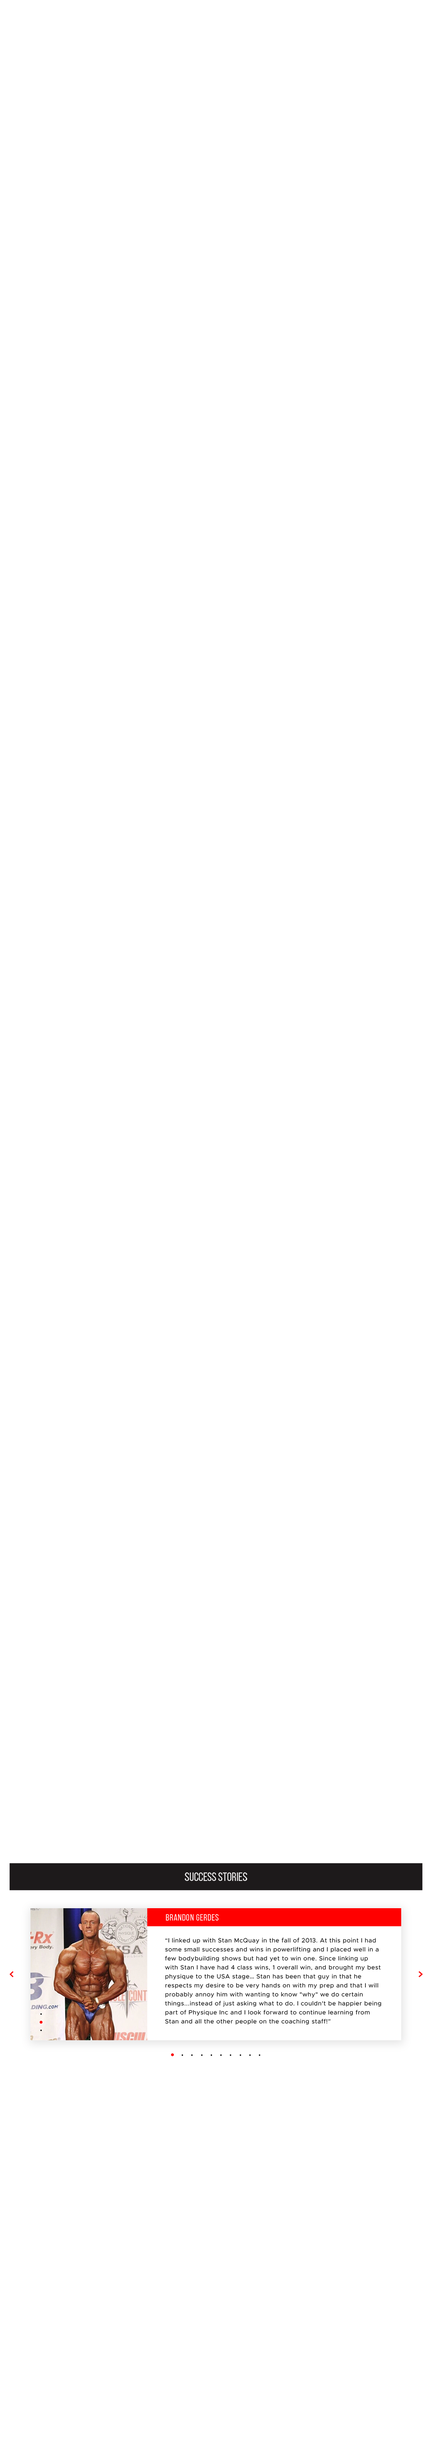
<style>
.page{position:relative;width:432px;height:2458px;background:#ffffff}
.page>*{position:absolute;margin:0}
.t1{font:12px "BebasNeueRegular";color:#ffffff;text-transform:uppercase}
.t2{font:9px "BebasNeueRegular";letter-spacing:0.05em;color:#ffffff}
.t3{font:6px/9px "Metropolis-Regular";letter-spacing:0.05em;color:#000000}
.t4{font:6px/9px "MyriadPro-Regular";letter-spacing:0.05em;color:#000000}
</style>
<div class="page">
<p class="t1" style="left:185px;top:1872px;width:62px;height:9px">SUCCESS STORIES</p>
<p class="t2" style="left:166px;top:1914px;width:52px;height:7px">Brandon Gerdes</p>
<p class="t3" style="left:165px;top:1938px;width:216px;height:87px">“I linked up with Stan McQuay in the fall of 2013. At this point I had some small successes and wins in powerlifting and I placed well in a few bodybuilding shows but had yet to win one. Since linking up with Stan I have had 4 class wins, 1 overall win, and brought my best physique to the USA stage<span class="t4">...</span> Stan has been that guy in that he respects my desire to be very hands on with my prep and that I will probably annoy him with wanting to know "why" we do certain things...instead of just asking what to do. I couldn't be happier being part of Physique Inc and I look forward to continue learning from Stan and all the other people on the coaching staff!”</p>
</div>
